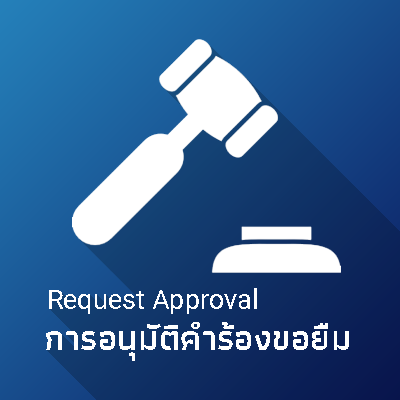
<style>
.page{position:relative;width:400px;height:400px}
.page>*{position:absolute;margin:0}
.t1{font:26.5px "Roboto-Regular";letter-spacing:0.01em;color:#ffffff}
.t2{font:35.3px "Athiti-SemiBold";letter-spacing:0.01em;color:#ffffff}
</style>
<div class="page">
<p class="t1" style="left:49px;top:288px;width:208px;height:26px">Request Approval</p>
<p class="t2" style="left:46px;top:322px;width:303px;height:39px">การอนุมัติคำร้องขอยืม</p>
</div>
